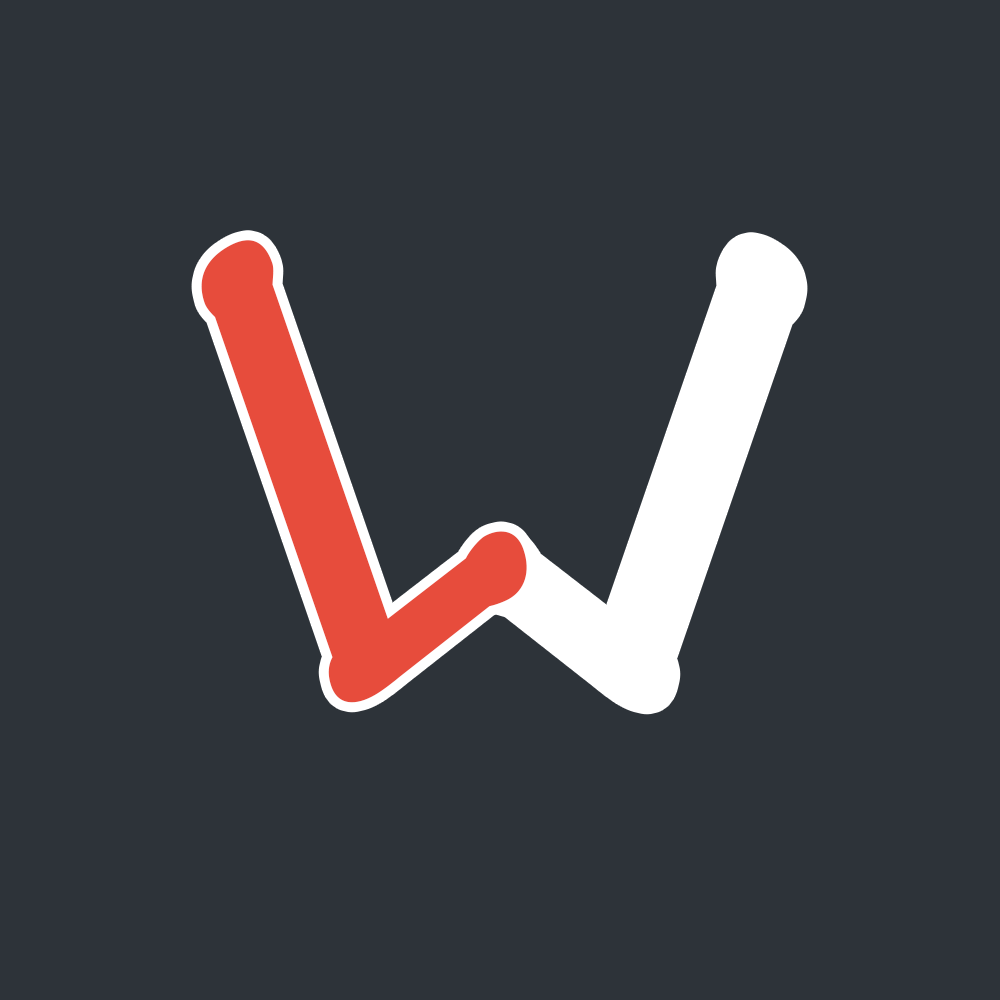
<style>
.page{position:relative;width:1000px;height:1000px;background:#2d3339}
.page>*{position:absolute;margin:0}
.t1{font:699.5px "TektonPro-BoldCond";color:#e74c3c;font-style:italic;scale:1.1 1}
.t2{font:699.5px "TektonPro-BoldCond";color:#ffffff;font-style:italic;scale:1.1 1}
</style>
<div class="page">
<p class="t1" style="left:201px;top:240px;width:326px;height:463px;rotate:-30deg">L</p>
<p class="t2" style="left:472px;top:242px;width:326px;height:463px;rotate:-150deg">L</p>
</div>
